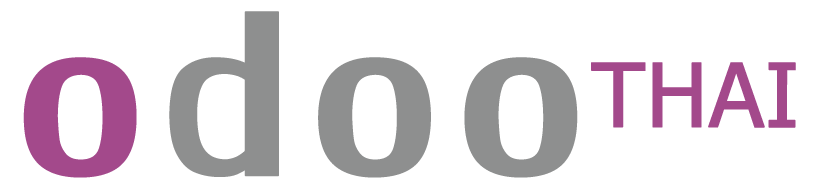
<style>
.page{position:relative;width:827px;height:192px;background:#ffffff}
.page>*{position:absolute;margin:0}
.t1{font:350.8px "LilyUPC";letter-spacing:0.05em;color:#8e8f8f;font-weight:bold}
.t2{font:350.8px "LilyUPC";letter-spacing:0.05em;color:#a3498b;font-weight:bold}
.t3{font:88.1px "Tahoma";letter-spacing:-0.01em;color:#a3498b;font-weight:bold;scale:1.03 1}
</style>
<div class="page">
<p class="t1" style="left:23px;top:11px;width:555px;height:167px"><span class="t2">o</span>doo</p>
<p class="t3" style="left:591px;top:62px;width:205px;height:66px">THAI</p>
</div>
